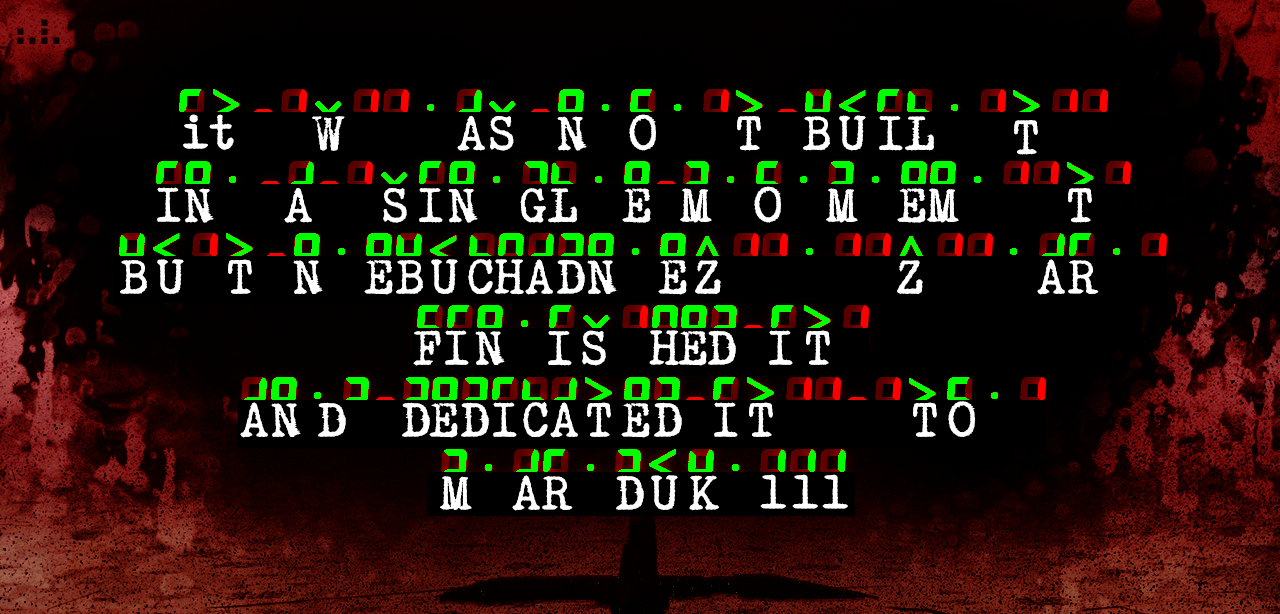
<style>
.page{position:relative;width:1280px;height:614px;background:#000000}
.page>*{position:absolute;margin:0}
.t1{font:48px "HOLLYWOOD-STARFIRE";color:#ffffff}
</style>
<div class="page">
<p class="t1" style="left:183px;top:114px;width:51px;height:36px">it</p>
<p class="t1" style="left:312px;top:116px;width:33px;height:35px">W</p>
<p class="t1" style="left:457px;top:115px;width:57px;height:36px">AS</p>
<p class="t1" style="left:557px;top:116px;width:30px;height:35px">N</p>
<p class="t1" style="left:629px;top:114px;width:27px;height:37px">O</p>
<p class="t1" style="left:737px;top:116px;width:24px;height:35px">T</p>
<p class="t1" style="left:803px;top:116px;width:27px;height:35px">B</p>
<p class="t1" style="left:839px;top:115px;width:27px;height:36px">U</p>
<p class="t1" style="left:879px;top:116px;width:24px;height:35px">I</p>
<p class="t1" style="left:905px;top:116px;width:29px;height:35px">L</p>
<p class="t1" style="left:1014px;top:120px;width:24px;height:35px">T</p>
<p class="t1" style="left:157px;top:187px;width:24px;height:35px">I</p>
<p class="t1" style="left:184px;top:188px;width:30px;height:35px">N</p>
<p class="t1" style="left:284px;top:188px;width:28px;height:35px">A</p>
<p class="t1" style="left:383px;top:188px;width:24px;height:35px">S</p>
<p class="t1" style="left:419px;top:188px;width:24px;height:35px">I</p>
<p class="t1" style="left:448px;top:188px;width:30px;height:35px">N</p>
<p class="t1" style="left:520px;top:188px;width:26px;height:35px">G</p>
<p class="t1" style="left:548px;top:188px;width:29px;height:35px">L</p>
<p class="t1" style="left:622px;top:188px;width:29px;height:35px">E</p>
<p class="t1" style="left:680px;top:188px;width:32px;height:35px">M</p>
<p class="t1" style="left:754px;top:186px;width:27px;height:37px">O</p>
<p class="t1" style="left:826px;top:188px;width:32px;height:35px">M</p>
<p class="t1" style="left:897px;top:188px;width:29px;height:35px">E</p>
<p class="t1" style="left:927px;top:188px;width:32px;height:35px">M</p>
<p class="t1" style="left:1068px;top:188px;width:24px;height:35px">T</p>
<p class="t1" style="left:120px;top:260px;width:27px;height:34px">B</p>
<p class="t1" style="left:157px;top:259px;width:27px;height:35px">U</p>
<p class="t1" style="left:228px;top:259px;width:24px;height:35px">T</p>
<p class="t1" style="left:293px;top:260px;width:30px;height:34px">N</p>
<p class="t1" style="left:364px;top:260px;width:29px;height:35px">E</p>
<p class="t1" style="left:396px;top:260px;width:27px;height:34px">B</p>
<p class="t1" style="left:431px;top:259px;width:27px;height:35px">U</p>
<p class="t1" style="left:468px;top:259px;width:25px;height:35px">C</p>
<p class="t1" style="left:494px;top:259px;width:30px;height:36px">H</p>
<p class="t1" style="left:525px;top:259px;width:28px;height:36px">A</p>
<p class="t1" style="left:557px;top:259px;width:28px;height:35px">D</p>
<p class="t1" style="left:587px;top:260px;width:30px;height:34px">N</p>
<p class="t1" style="left:658px;top:260px;width:29px;height:35px">E</p>
<p class="t1" style="left:695px;top:260px;width:26px;height:34px">Z</p>
<p class="t1" style="left:897px;top:260px;width:26px;height:34px">Z</p>
<p class="t1" style="left:1037px;top:259px;width:28px;height:36px">A</p>
<p class="t1" style="left:1068px;top:260px;width:31px;height:34px">R</p>
<p class="t1" style="left:413px;top:330px;width:28px;height:36px">F</p>
<p class="t1" style="left:445px;top:330px;width:24px;height:35px">I</p>
<p class="t1" style="left:475px;top:331px;width:30px;height:34px">N</p>
<p class="t1" style="left:548px;top:331px;width:24px;height:35px">I</p>
<p class="t1" style="left:582px;top:330px;width:24px;height:36px">S</p>
<p class="t1" style="left:649px;top:330px;width:30px;height:36px">H</p>
<p class="t1" style="left:678px;top:331px;width:29px;height:35px">E</p>
<p class="t1" style="left:708px;top:330px;width:28px;height:35px">D</p>
<p class="t1" style="left:769px;top:330px;width:24px;height:35px">I</p>
<p class="t1" style="left:806px;top:330px;width:24px;height:35px">T</p>
<p class="t1" style="left:948px;top:401px;width:27px;height:36px">O</p>
<p class="t1" style="left:240px;top:402px;width:28px;height:36px">A</p>
<p class="t1" style="left:271px;top:403px;width:30px;height:34px">N</p>
<p class="t1" style="left:318px;top:402px;width:28px;height:35px">D</p>
<p class="t1" style="left:402px;top:402px;width:28px;height:35px">D</p>
<p class="t1" style="left:429px;top:403px;width:29px;height:35px">E</p>
<p class="t1" style="left:461px;top:402px;width:28px;height:35px">D</p>
<p class="t1" style="left:493px;top:402px;width:24px;height:35px">I</p>
<p class="t1" style="left:523px;top:402px;width:25px;height:35px">C</p>
<p class="t1" style="left:550px;top:402px;width:28px;height:36px">A</p>
<p class="t1" style="left:587px;top:402px;width:24px;height:35px">T</p>
<p class="t1" style="left:621px;top:403px;width:29px;height:35px">E</p>
<p class="t1" style="left:654px;top:402px;width:28px;height:35px">D</p>
<p class="t1" style="left:714px;top:402px;width:24px;height:35px">I</p>
<p class="t1" style="left:749px;top:402px;width:24px;height:35px">T</p>
<p class="t1" style="left:913px;top:402px;width:24px;height:35px">T</p>
<p class="t1" style="left:440px;top:476px;width:32px;height:34px">M</p>
<p class="t1" style="left:512px;top:475px;width:28px;height:36px">A</p>
<p class="t1" style="left:542px;top:476px;width:31px;height:34px">R</p>
<p class="t1" style="left:616px;top:475px;width:28px;height:35px">D</p>
<p class="t1" style="left:651px;top:475px;width:27px;height:35px">U</p>
<p class="t1" style="left:689px;top:475px;width:30px;height:36px">K</p>
<p class="t1" style="left:760px;top:474px;width:26px;height:35px">1</p>
<p class="t1" style="left:792px;top:474px;width:26px;height:35px">1</p>
<p class="t1" style="left:822px;top:474px;width:26px;height:35px">1</p>
</div>
